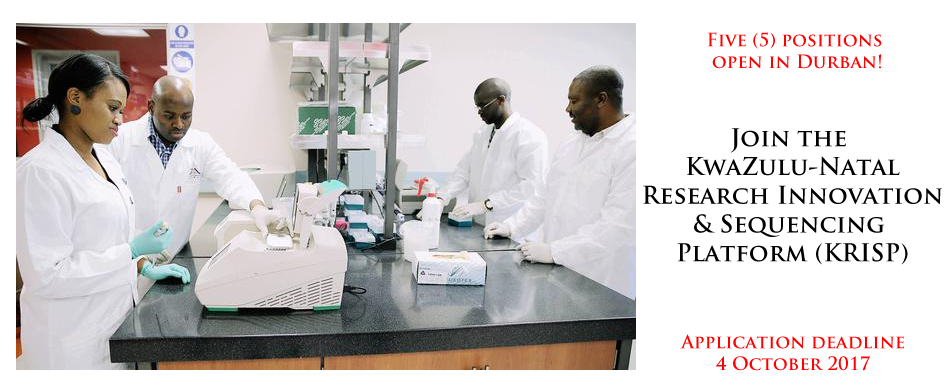
<style>
.page{position:relative;width:950px;height:390px;background:#ffffff}
.page>*{position:absolute;margin:0}
.t1{font:18px "TrajanPro-Bold";color:#ff0000}
.t2{font:24px "TrajanPro-Bold";color:#010101}
</style>
<div class="page">
<p class="t1" style="left:707px;top:32px;width:175px;height:37px;text-align:center">Five (5) positions <br>open in Durban!</p>
<p class="t2" style="left:643px;top:128px;width:299px;height:137px;text-align:center">Join the <br>KwaZulu-Natal<br>Research Innovation<br>&amp; Sequencing <br>Platform (KRISP)</p>
<p class="t1" style="left:680px;top:334px;width:224px;height:37px;text-align:center">Application deadline<br>4 October 2017</p>
</div>
